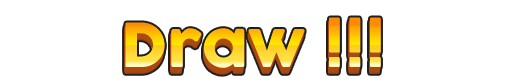
<style>
.page{position:relative;width:512px;height:83px;background:#ffffff}
.page>*{position:absolute;margin:0}
.t1{font:60px "Cocogoose"}
</style>
<div class="page">
<p class="t1" style="left:125px;top:17px;width:256px;height:51px">Draw !!!</p>
</div>
